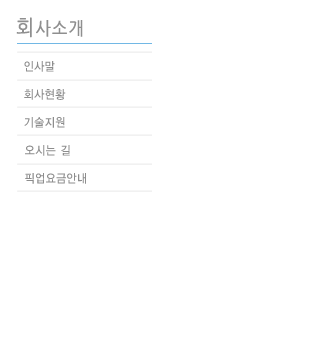
<style>
.page{position:relative;width:332px;height:343px;background:#ffffff}
.page>*{position:absolute;margin:0}
.t1{font:18px "NanumGothicOTF";letter-spacing:0.05em;color:#8f8f8f;font-weight:bold;scale:0.9 1}
.t2{font:21px "NanumGothicOTF";letter-spacing:0.05em;color:#8f8f8f;font-weight:bold;scale:0.9 1}
.t3{font:12px/28px "YDIYGO330";letter-spacing:0.05em;color:#8d8d8d;scale:0.9 1}
</style>
<div class="page">
<p class="t1" style="left:16px;top:17px;width:67px;height:21px"><span class="t2">회</span>사소개</p>
<p class="t3" style="left:24px;top:61px;width:42px;height:67px">인사말<br>회사현황<br>기술지원</p>
<p class="t3" style="left:25px;top:145px;width:61px;height:39px">오시는 길<br>픽업요금안내</p>
</div>
